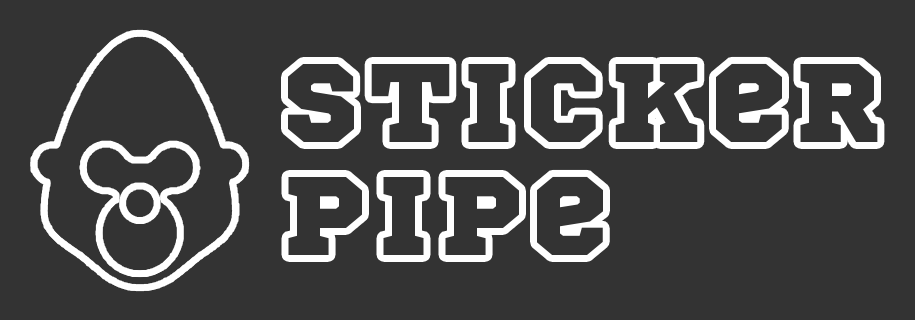
<style>
.page{position:relative;width:915px;height:320px;background:#333333}
.page>*{position:absolute;margin:0}
.t1{font:111.5px/113.2px "SportsWorld";letter-spacing:0.09em;color:#333333}
</style>
<div class="page">
<p class="t1" style="left:288px;top:63px;width:590px;height:192px">Sticker<br>Pipe</p>
</div>
